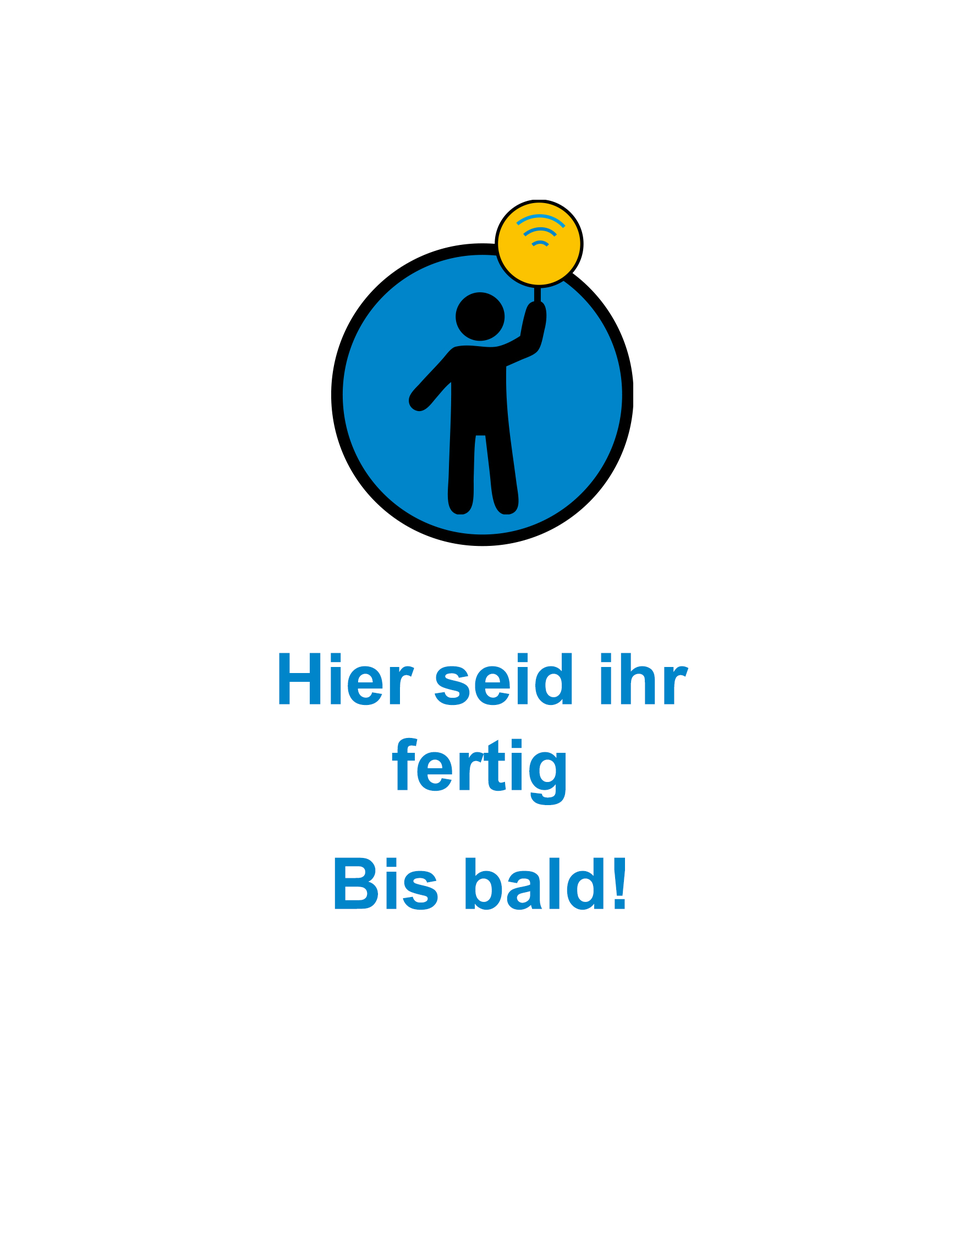
<style>
.page{position:relative;width:965px;height:1236px;background:#ffffff}
.page>*{position:absolute;margin:0}
.t1{font:71.5px "Arial-BoldMT";color:#0085ca}
</style>
<div class="page">
<p class="t1" style="left:279px;top:653px;width:410px;height:257px;text-align:center">Hier seid ihr<br>fertig<br><br>Bis bald!</p>
</div>
